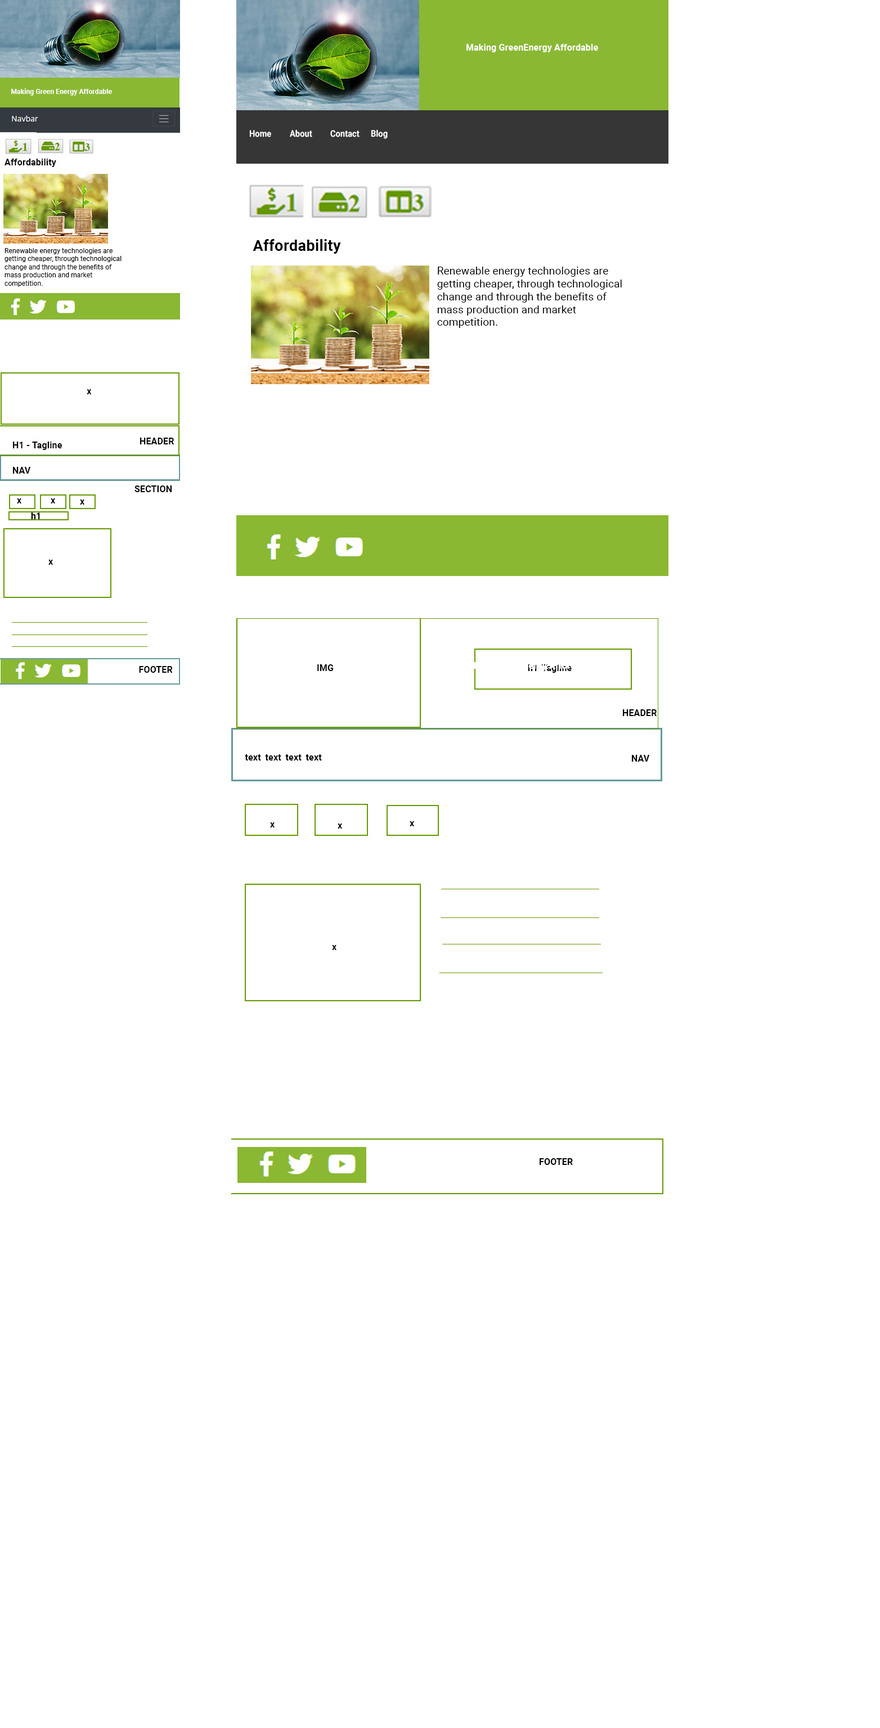
<style>
.page{position:relative;width:880px;height:1728px;background:#ffffff}
.page>*{position:absolute;margin:0}
.t1{font:9px "Roboto-Bold";letter-spacing:0.01em;color:#ffffff}
.t2{font:6.8px "Roboto-Bold";letter-spacing:0.01em;color:#ffffff}
.t3{font:9px "Roboto-Bold";letter-spacing:0.01em;color:#ffffff;scale:0.9 1}
.t4{font:10px "Gadugi-Bold";letter-spacing:0.01em;color:#ffffff;scale:0.9 1}
.t5{font:9px "Roboto-Bold";letter-spacing:0.01em;color:#000000}
.t6{font:15.3px "Roboto-Bold";letter-spacing:0.01em;color:#000000}
.t7{font:6.8px "Roboto-Regular";letter-spacing:0.01em;color:#000000}
.t8{font:10.7px "Roboto-Regular";letter-spacing:0.01em;color:#000000}
.t9{font:9px "Roboto-Bold";letter-spacing:0.01em}
</style>
<div class="page">
<p class="t1" style="left:466px;top:44px;width:132px;height:8px">Making GreenEnergy Affordable</p>
<p class="t2" style="left:11px;top:88px;width:101px;height:8px">Making Green Energy Affordable</p>
<p class="t3" style="left:249px;top:129px;width:139px;height:10px"><span class="t4"> </span>Home About Contact Blog</p>
<p class="t5" style="left:4px;top:159px;width:52px;height:8px">Affordability</p>
<p class="t6" style="left:253px;top:239px;width:88px;height:15px">Affordability</p>
<p class="t7" style="left:4px;top:248px;width:118px;height:39px">Renewable energy technologies are <br>getting cheaper, through technological <br>change and through the benefits of <br>mass production and market <br>competition.</p>
<p class="t8" style="left:437px;top:267px;width:185px;height:61px">Renewable energy technologies are <br>getting cheaper, through technological <br>change and through the benefits of <br>mass production and market <br>competition.</p>
<p class="t5" style="left:87px;top:389px;width:5px;height:5px">x</p>
<p class="t5" style="left:140px;top:438px;width:34px;height:6px">HEADER</p>
<p class="t5" style="left:13px;top:442px;width:49px;height:8px">H1 - Tagline</p>
<p class="t5" style="left:13px;top:467px;width:18px;height:7px">NAV</p>
<p class="t5" style="left:134px;top:485px;width:38px;height:7px">SECTION</p>
<p class="t5" style="left:17px;top:498px;width:4px;height:5px">x</p>
<p class="t5" style="left:51px;top:498px;width:4px;height:5px">x</p>
<p class="t5" style="left:80px;top:500px;width:4px;height:5px">x</p>
<p class="t5" style="left:31px;top:512px;width:9px;height:7px">h1</p>
<p class="t5" style="left:48px;top:560px;width:5px;height:5px">x</p>
<p class="t5" style="left:317px;top:664px;width:16px;height:7px">IMG</p>
<p class="t9" style="left:528px;top:664px;width:44px;height:9px">h1-Tagline</p>
<p class="t5" style="left:139px;top:666px;width:34px;height:7px">FOOTER</p>
<p class="t5" style="left:623px;top:709px;width:34px;height:7px">HEADER</p>
<p class="t5" style="left:245px;top:754px;width:77px;height:6px">text text text text</p>
<p class="t5" style="left:632px;top:755px;width:18px;height:7px">NAV</p>
<p class="t5" style="left:410px;top:821px;width:4px;height:5px">x</p>
<p class="t5" style="left:270px;top:822px;width:4px;height:5px">x</p>
<p class="t5" style="left:338px;top:824px;width:4px;height:5px">x</p>
<p class="t5" style="left:332px;top:945px;width:4px;height:5px">x</p>
<p class="t5" style="left:539px;top:1158px;width:34px;height:7px">FOOTER</p>
</div>
